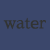
<style>
.page{position:relative;width:50px;height:50px;background:#3b476b}
.page>*{position:absolute;margin:0}
.t1{font:16px "SawarabiMincho-Medium";color:#323433}
</style>
<div class="page">
<p class="t1" style="left:3px;top:17px;width:43px;height:13px">water</p>
</div>
